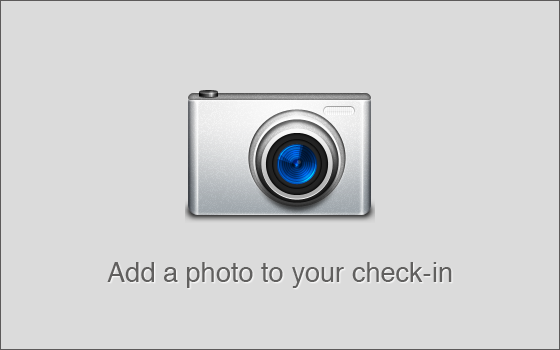
<style>
.page{position:relative;width:560px;height:350px;background:#dbdbdb}
.page>*{position:absolute;margin:0}
.t1{font:27.2px "Helvetica";color:#61605f}
</style>
<div class="page">
<p class="t1" style="left:107px;top:262px;width:345px;height:26px">Add a photo to your check-in</p>
</div>
